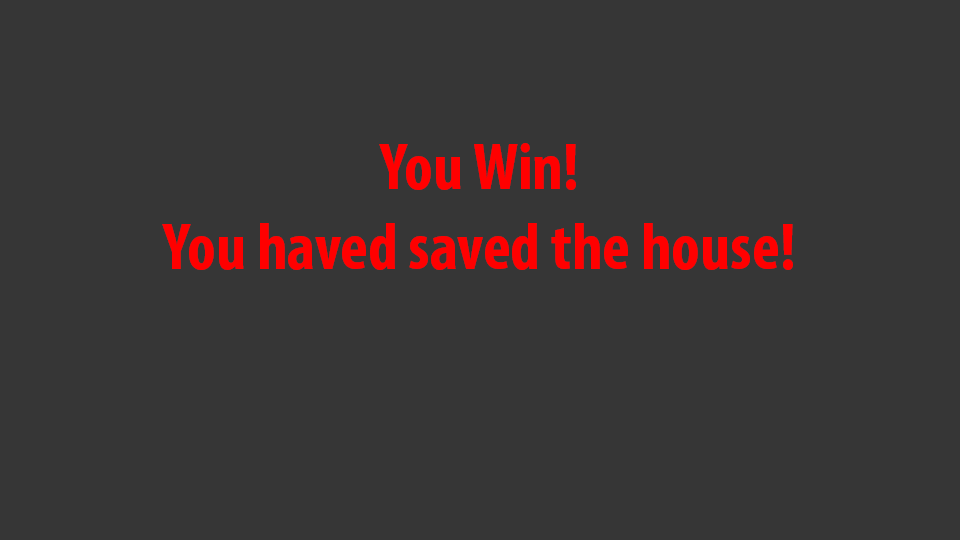
<style>
.page{position:relative;width:960px;height:540px;background:#363636}
.page>*{position:absolute;margin:0}
.t1{font:66.7px "MyriadPro-BoldCond";color:#ff0000}
</style>
<div class="page">
<p class="t1" style="left:162px;top:143px;width:631px;height:127px;text-align:center">You Win!<br>You haved saved the house!</p>
</div>
